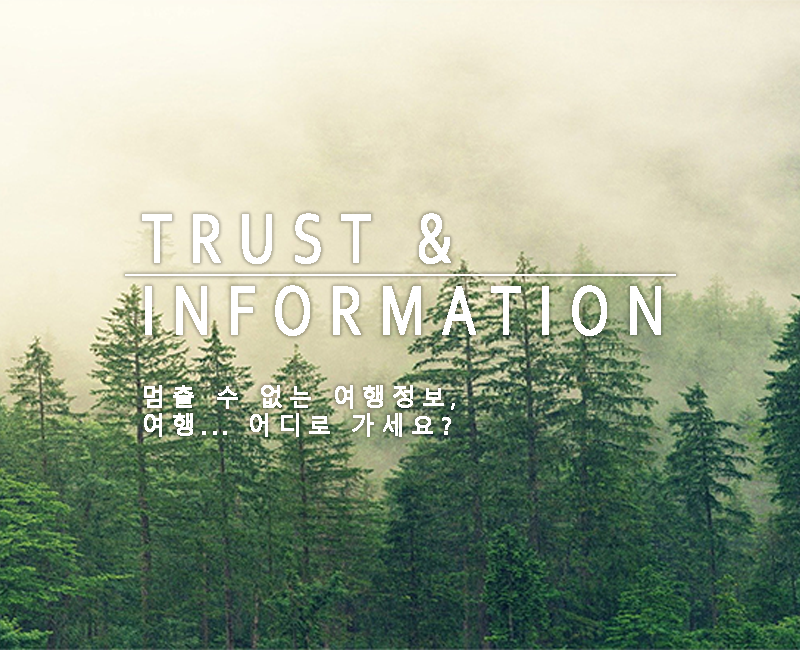
<style>
.page{position:relative;width:800px;height:650px}
.page>*{position:absolute;margin:0}
.t1{font:73.4px/72px "Corbel";letter-spacing:0.3em;color:#ffffff;font-weight:bold;scale:0.74 1}
.t2{font:24px/72px "MalgunGothic";letter-spacing:0.2em;color:#ffffff;font-weight:bold}
.t3{font:24px "MalgunGothic";letter-spacing:0.2em;color:#ffffff;font-weight:bold}
</style>
<div class="page">
<p class="t1" style="left:142px;top:213px;width:519px;height:224px">TRUST &amp;<br>INFORMATION<br><span class="t2">멈출 수 없는 여행정보,<br></span><span class="t3">여행... 어디로 가세요?</span></p>
</div>
